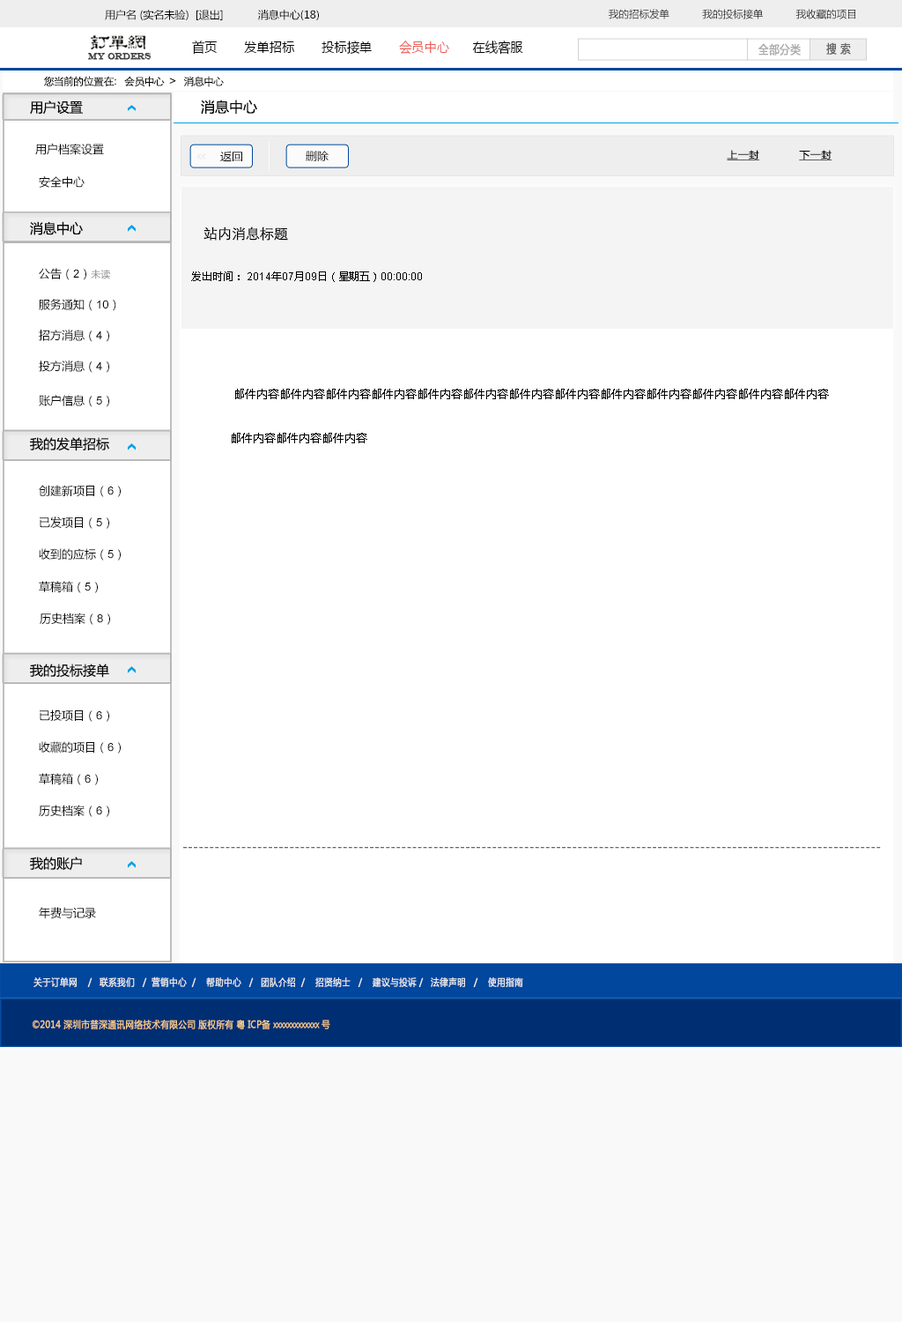
<style>
.page{position:relative;width:902px;height:1322px;background:#ffffff}
.page>*{position:absolute;margin:0}
.t1{font:10.6px "MicrosoftYaHei";color:#000000}
.t2{font:10.1px "MicrosoftYaHei";color:#000000}
.t3{font:13.6px "MicrosoftYaHei";color:#000000;font-variant:small-caps;scale:0.94 1}
.t4{font:13.6px "MicrosoftYaHei";color:#ed6059;font-variant:small-caps;scale:0.94 1}
.t5{font:8.7px "EngraversMT";color:#434343;font-variant:small-caps;font-weight:bold;scale:0.86 1}
.t6{font:11.6px "MicrosoftYaHei";color:#aaaaaa;font-variant:small-caps;font-weight:bold;scale:0.86 1}
.t7{font:11.6px "MicrosoftYaHei";color:#626262;font-variant:small-caps;font-weight:bold;scale:0.86 1}
.t8{font:10.6px "STXihei";color:#060606}
.t9{font:13.2px "MicrosoftYaHei";color:#060606}
.t10{font:14.1px "MicrosoftYaHei";color:#060606}
.t11{font:11.5px "MicrosoftYaHei";color:#060606}
.t12{font:9.7px "MicrosoftYaHei";color:#000000;font-weight:bold;text-decoration:underline;scale:1.07 1}
.t13{font:9.7px "MicrosoftYaHei";letter-spacing:0.01em;color:#000000;font-weight:bold;text-decoration:underline;scale:1.07 1}
.t14{font:10.7px "MicrosoftYaHei";color:#060606;scale:1.07 1}
.t15{font:14.1px "STXihei";color:#000000}
.t16{font:11.5px "ArialMT";color:#060606}
.t17{font:9.7px "MicrosoftYaHei";color:#888584}
.t18{font:10.6px "ArialMT";color:#000000}
.t19{font:12.3px/43.9px "MicrosoftYaHei";color:#000000;scale:0.96 1}
.t20{font:12.3px "MicrosoftYaHei"}
.t21{font:9.7px "MicrosoftYaHei";color:#eeeeee;font-variant:small-caps;font-weight:bold;scale:0.86 1}
.t22{font:13.6px "STXihei";color:#eeeeee;font-variant:small-caps;font-weight:bold;scale:0.86 1}
.t23{font:9.7px "MicrosoftYaHei";color:#facd89;font-variant:small-caps;font-weight:bold;scale:0.87 1}
.t24{font:9.7px "MicrosoftYaHei";color:#eeeeee;font-variant:small-caps;font-weight:bold;scale:0.87 1}
</style>
<div class="page">
<p class="t1" style="left:105px;top:10px;width:214px;height:10px">用户名 (实名未验)  [退出]           消息中心(18)</p>
<p class="t2" style="left:609px;top:9px;width:247px;height:10px">我的招标发单           我的投标接单           我收藏的项目</p>
<p class="t3" style="left:192px;top:41px;width:331px;height:14px">首页       发单招标       投标接单       <span class="t4">会员中心</span>      在线客服</p>
<p class="t5" style="left:88px;top:53px;width:64px;height:7px">MY ORDERS</p>
<p class="t6" style="left:759px;top:43px;width:42px;height:13px">全部分类</p>
<p class="t7" style="left:826px;top:42px;width:25px;height:13px">搜 索</p>
<p class="t8" style="left:43px;top:76px;width:181px;height:11px">您当前的位置在：  会员中心  &gt;   消息中心</p>
<p class="t9" style="left:30px;top:100px;width:53px;height:15px">用户设置</p>
<p class="t10" style="left:201px;top:100px;width:56px;height:15px">消息中心</p>
<p class="t11" style="left:35px;top:143px;width:69px;height:12px">用户档案设置</p>
<p class="t12" style="left:727px;top:150px;width:106px;height:10px">上一封            <span class="t13">下一封</span></p>
<p class="t14" style="left:220px;top:152px;width:22px;height:10px">返回</p>
<p class="t14" style="left:306px;top:151px;width:23px;height:10px">删除</p>
<p class="t11" style="left:39px;top:176px;width:46px;height:12px">安全中心</p>
<p class="t9" style="left:30px;top:221px;width:53px;height:14px">消息中心</p>
<p class="t15" style="left:204px;top:226px;width:84px;height:15px">站内消息标题</p>
<p class="t11" style="left:39px;top:268px;width:71px;height:12px">公告（<span class="t16">2</span>）<span class="t17">未读</span></p>
<p class="t18" style="left:191px;top:271px;width:231px;height:11px"><span class="t1">发出时间：</span> 2014<span class="t1">年</span>07<span class="t1">月</span>09<span class="t1">日（星期五）</span>00:00:00</p>
<p class="t11" style="left:39px;top:299px;width:77px;height:12px">服务通知（<span class="t16">10</span>）</p>
<p class="t11" style="left:39px;top:330px;width:70px;height:12px">招方消息（<span class="t16">4</span>）</p>
<p class="t11" style="left:39px;top:360px;width:70px;height:13px">投方消息（<span class="t16">4</span>）</p>
<p class="t19" style="left:232px;top:389px;width:597px;height:54px">邮件内容邮件内容邮件内容邮件内容邮件内容邮件内容邮件内容邮件内容邮件内容邮件内容邮件内容邮件内容邮件内容邮件内容邮件内容邮件内容</p>
<p class="t11" style="left:39px;top:395px;width:70px;height:12px">账户信息（<span class="t16">5</span>）</p>
<p class="t9" style="left:30px;top:437px;width:79px;height:14px">我的发单招标</p>
<p class="t11" style="left:39px;top:485px;width:82px;height:12px">创建新项目（<span class="t16">6</span>）</p>
<p class="t11" style="left:40px;top:516px;width:69px;height:13px">已发项目（<span class="t16">5</span>）</p>
<p class="t11" style="left:39px;top:548px;width:82px;height:12px">收到的应标（<span class="t16">5</span>）</p>
<p class="t11" style="left:39px;top:581px;width:59px;height:12px">草稿箱（<span class="t16">5</span>）</p>
<p class="t11" style="left:40px;top:612px;width:70px;height:13px">历史档案（<span class="t16">8</span>）</p>
<p class="t9" style="left:30px;top:663px;width:79px;height:15px">我的投标接单</p>
<p class="t11" style="left:40px;top:709px;width:69px;height:13px">已投项目（<span class="t16">6</span>）</p>
<p class="t11" style="left:39px;top:741px;width:82px;height:12px">收藏的项目（<span class="t16">6</span>）</p>
<p class="t11" style="left:39px;top:773px;width:59px;height:12px">草稿箱（<span class="t16">6</span>）</p>
<p class="t11" style="left:39px;top:804px;width:70px;height:13px">历史档案（<span class="t16">6</span>）</p>
<p class="t9" style="left:30px;top:856px;width:52px;height:15px">我的账户</p>
<p class="t20" style="left:183px;top:847px;width:698px;height:1px">-----------------------------------------------------------------------------------------------------------------------------------</p>
<p class="t11" style="left:39px;top:907px;width:57px;height:11px">年费与记录</p>
<p class="t21" style="left:33px;top:976px;width:490px;height:11px"><span class="t22"><br><br></span>关于订单网    /   联系我们   /  营销中心  /    帮助中心   /   团队介绍  /    招贤纳士   /    建议与投诉 /   法律声明   /    使用指南</p>
<p class="t23" style="left:33px;top:1019px;width:297px;height:10px"><span class="t24"> </span>©2014 深圳市普深通讯网络技术有限公司 版权所有 粤 ICP备 xxxxxxxxxxxxx 号</p>
</div>
